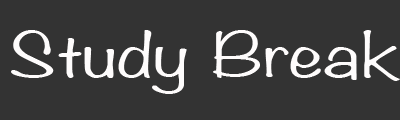
<style>
.page{position:relative;width:400px;height:120px;background:#333333}
.page>*{position:absolute;margin:0}
.t1{font:55px "Noteworthy-Light";color:#fefcfc;scale:1.5 1}
</style>
<div class="page">
<p class="t1" style="left:11px;top:30px;width:389px;height:64px">Study Break</p>
</div>
